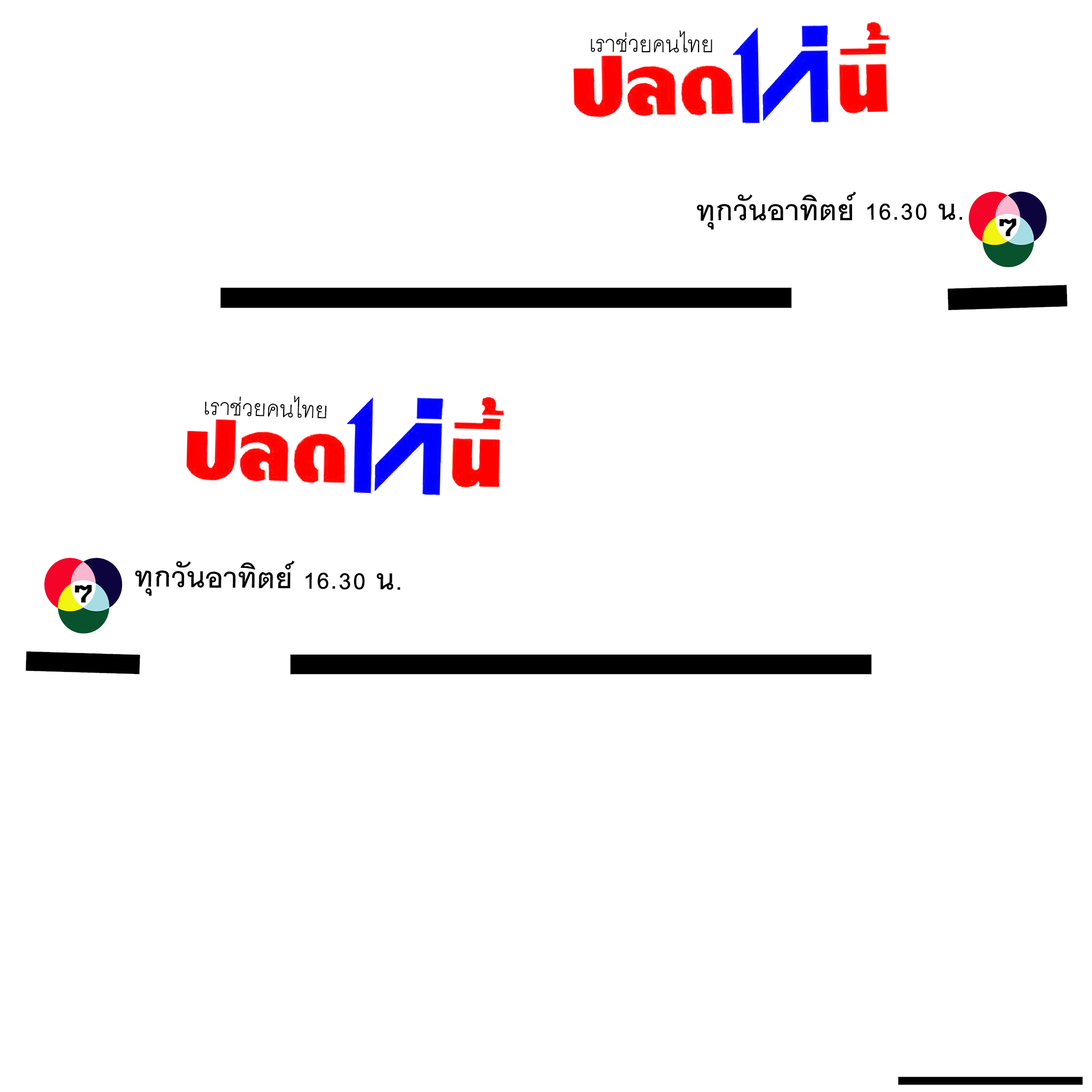
<style>
.page{position:relative;width:1092px;height:1092px;background:#ffffff}
.page>*{position:absolute;margin:0}
.t1{font:32px "CordiaNew";color:#000000}
.t2{font:40px "CordiaNew-Bold";color:#000000}
</style>
<div class="page">
<p class="t1" style="left:591px;top:30px;width:121px;height:23px">เราช่วยคนไทย</p>
<p class="t2" style="left:697px;top:191px;width:265px;height:39px">ทุกวันอาทิตย์ 16.30 น.</p>
<p class="t1" style="left:205px;top:396px;width:122px;height:23px;rotate:2deg">เราช่วยคนไทย</p>
<p class="t2" style="left:135px;top:560px;width:265px;height:36px;rotate:1deg">ทุกวันอาทิตย์ 16.30 น.</p>
</div>
